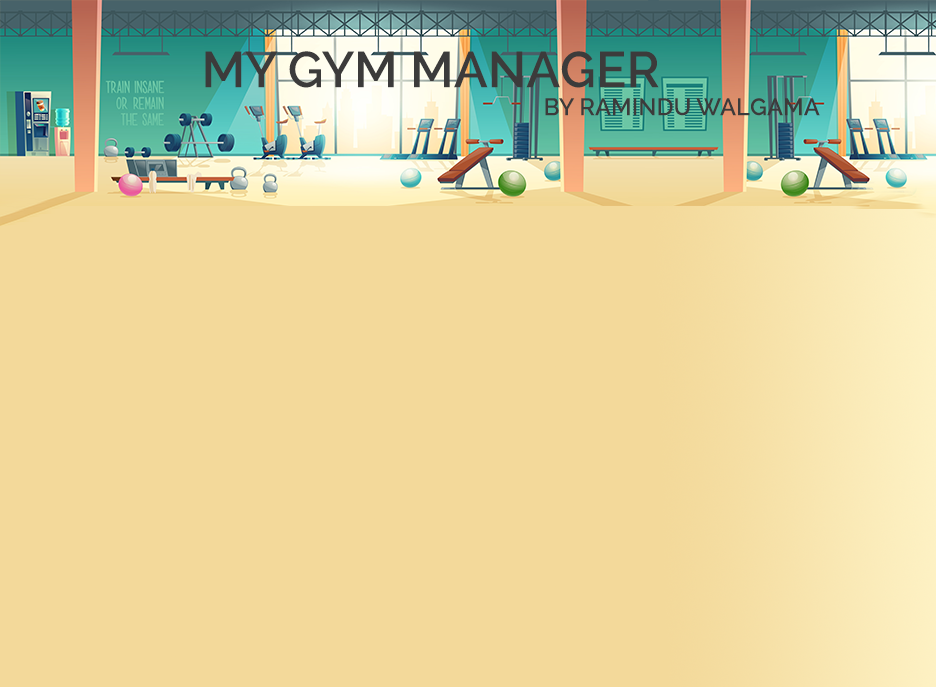
<style>
.page{position:relative;width:936px;height:687px;background:#f3d99a}
.page>*{position:absolute;margin:0}
.t1{font:50.2px "Raleway-SemiBold";color:#3c3b3b;text-transform:uppercase}
.t2{font:23.8px "Raleway-SemiBold";color:#3c3b3b;text-transform:uppercase}
</style>
<div class="page">
<p class="t1" style="left:205px;top:51px;width:454px;height:37px">My Gym Manager</p>
<p class="t2" style="left:545px;top:98px;width:275px;height:18px">by ramindu walgama</p>
</div>
